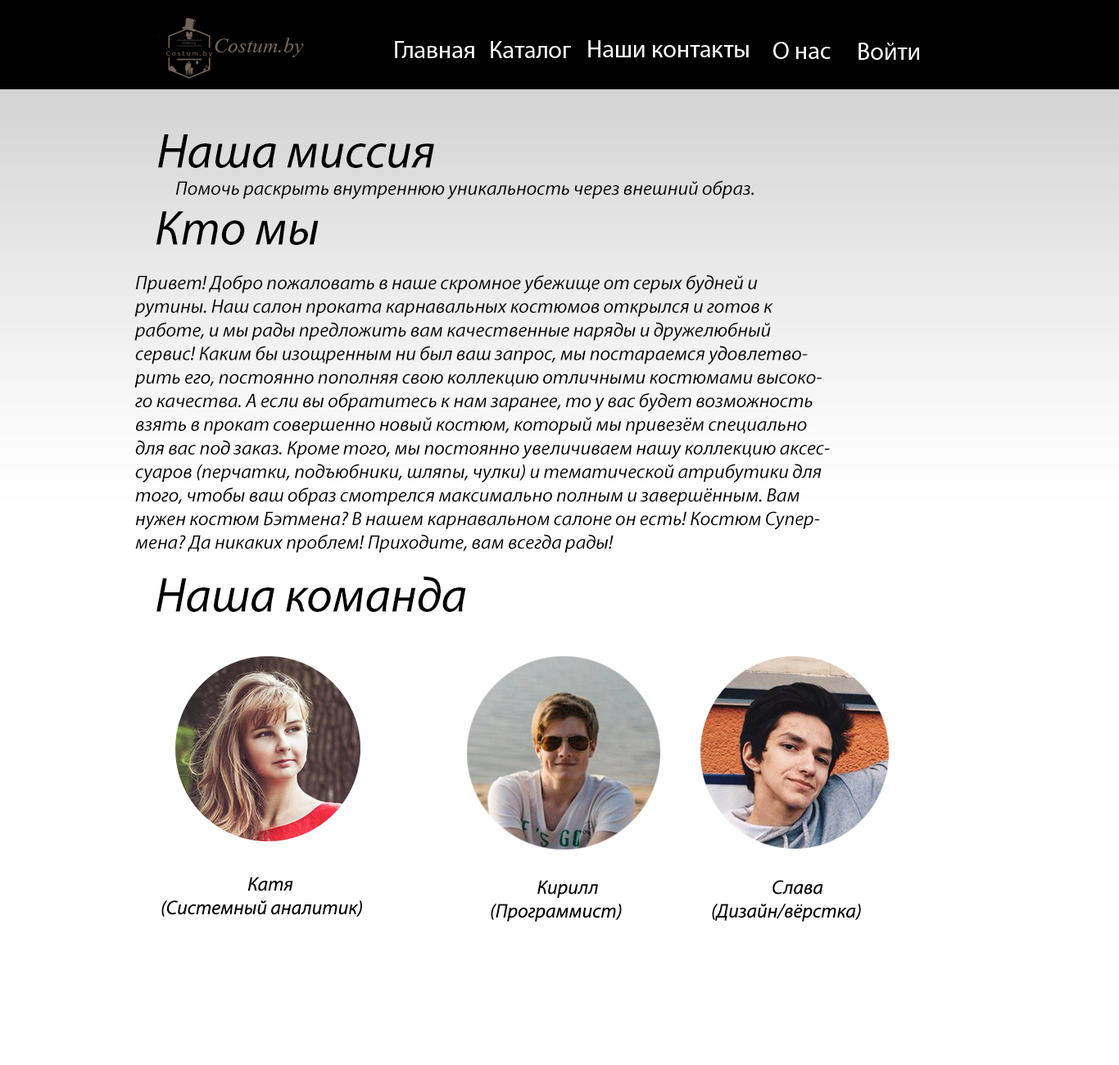
<style>
.page{position:relative;width:1119px;height:1065px;background:#ffffff}
.page>*{position:absolute;margin:0}
.t1{font:49.2px "MyriadPro-It";color:#000000}
.t2{font:19.7px "MyriadPro-It";color:#000000}
</style>
<div class="page">
<p class="t1" style="left:158px;top:134px;width:276px;height:34px">Наша миссия</p>
<p class="t2" style="left:175px;top:180px;width:579px;height:20px">Помочь раскрыть внутреннюю уникальность через внешний образ.</p>
<p class="t1" style="left:156px;top:211px;width:163px;height:34px">Кто мы</p>
<p class="t2" style="left:134px;top:275px;width:696px;height:278px">Привет! Добро пожаловать в наше скромное убежище от серых будней и рутины. Наш салон проката карнавальных костюмов открылся и готов к работе, и мы рады предложить вам качественные наряды и дружелюбный сервис! Каким бы изощренным ни был ваш запрос, мы постараемся удовлетворить его, постоянно пополняя свою коллекцию отличными костюмами высокого качества. А если вы обратитесь к нам заранее, то у вас будет возможность взять в прокат совершенно новый костюм, который мы привезём специально для вас под заказ. Кроме того, мы постоянно увеличиваем нашу коллекцию аксессуаров (перчатки, подъюбники, шляпы, чулки) и тематической атрибутики для того, чтобы ваш образ смотрелся максимально полным и завершённым. Вам нужен костюм Бэтмена? В нашем карнавальном салоне он есть! Костюм Супермена? Да никаких проблем! Приходите, вам всегда рады!</p>
<p class="t1" style="left:157px;top:576px;width:309px;height:36px">Наша команда</p>
<p class="t2" style="left:161px;top:877px;width:201px;height:40px;text-align:center">Катя<br>(Системный аналитик)<br><span class="t1">(Системный аналитик)</span></p>
<p class="t2" style="left:491px;top:880px;width:131px;height:42px;text-align:center">Кирилл<br>(Программист)</p>
<p class="t2" style="left:712px;top:880px;width:149px;height:42px;text-align:center">Слава<br>(Дизайн/вёрстка)</p>
</div>
